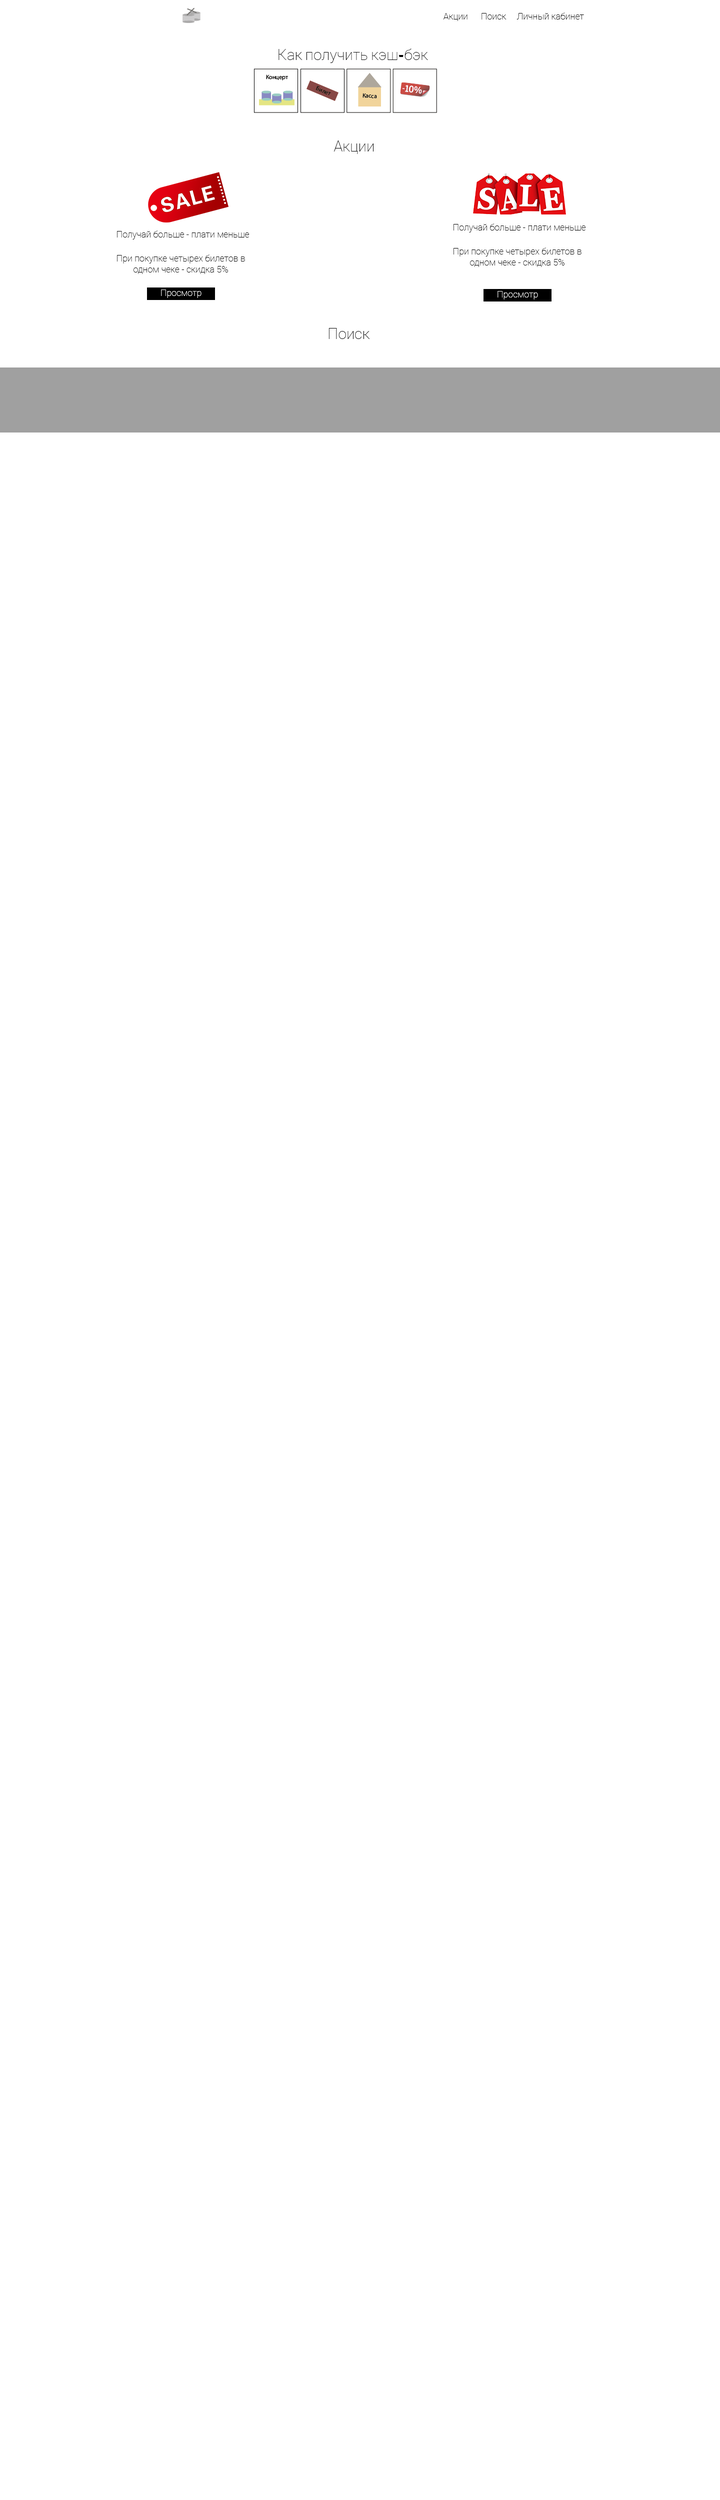
<style>
.page{position:relative;width:720px;height:2500px;background:#ffffff}
.page>*{position:absolute;margin:0}
.t1{font:9px "Roboto-Thin";color:#000000}
.t2{font:15px "Roboto-Thin";color:#000000}
.t3{font:15px "ShowcardGothic-Reg";color:#000000}
.t4{font:9px "Roboto-Thin";color:#ffffff}
</style>
<div class="page">
<p class="t1" style="left:443px;top:12px;width:141px;height:9px">Акции      Поиск     Личный кабинет</p>
<p class="t2" style="left:278px;top:48px;width:150px;height:15px">Как получить кэш<span class="t3">-</span>бэк</p>
<p class="t2" style="left:334px;top:140px;width:40px;height:14px">Акции</p>
<p class="t1" style="left:117px;top:230px;width:132px;height:10px">Получай больше - плати меньше</p>
<p class="t1" style="left:454px;top:224px;width:132px;height:8px">Получай больше - плати меньше</p>
<p class="t1" style="left:117px;top:254px;width:128px;height:20px;text-align:center">При покупке четырех билетов в одном чеке - скидка 5%</p>
<p class="t1" style="left:454px;top:248px;width:128px;height:19px;text-align:center">При покупке четырех билетов в одном чеке - скидка 5%</p>
<p class="t4" style="left:161px;top:290px;width:41px;height:8px">Просмотр</p>
<p class="t4" style="left:498px;top:291px;width:40px;height:9px">Просмотр</p>
<p class="t2" style="left:328px;top:328px;width:42px;height:11px">Поиск</p>
</div>
